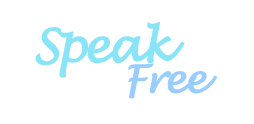
<style>
.page{position:relative;width:254px;height:124px;background:#ffffff}
.page>*{position:absolute;margin:0}
.t1{font:46px "LucidaHandwriting-Italic";letter-spacing:-0.075em;color:#89e4f8;font-weight:bold}
.t2{font:38px "LucidaHandwriting-Italic";letter-spacing:-0.075em;color:#99ccff;font-weight:bold}
</style>
<div class="page">
<p class="t1" style="left:35px;top:21px;width:150px;height:57px">Speak</p>
<p class="t2" style="left:128px;top:63px;width:90px;height:36px">Free</p>
</div>
